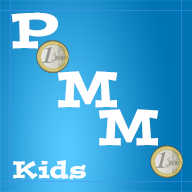
<style>
.page{position:relative;width:192px;height:192px}
.page>*{position:absolute;margin:0}
.t1{font:50px "PostinoStd";color:#ffffff}
.t2{font:24px "PostinoStd";color:#ffffff}
</style>
<div class="page">
<p class="t1" style="left:11px;top:12px;width:47px;height:37px">P</p>
<p class="t1" style="left:57px;top:71px;width:61px;height:37px">M</p>
<p class="t1" style="left:98px;top:109px;width:61px;height:37px">M</p>
<p class="t2" style="left:13px;top:160px;width:73px;height:20px">Kids</p>
</div>
